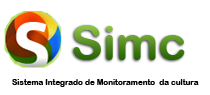
<style>
.page{position:relative;width:210px;height:95px;background:#ffffff}
.page>*{position:absolute;margin:0}
.t1{font:48px "ArialRoundedMTBold"}
.t2{font:8px "ArialRoundedMTBold";color:#000000}
</style>
<div class="page">
<p class="t1" style="left:73px;top:25px;width:112px;height:35px">Simc</p>
<p class="t2" style="left:12px;top:79px;width:187px;height:8px">Sistema Integrado de Monitoramento  da cultura</p>
</div>
